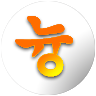
<style>
.page{position:relative;width:96px;height:96px;background:#ffffff}
.page>*{position:absolute;margin:0}
.t1{font:62.5px "Gungsuh";letter-spacing:0.01em;font-weight:bold}
</style>
<div class="page">
<p class="t1" style="left:15px;top:16px;width:58px;height:61px">늉</p>
</div>
